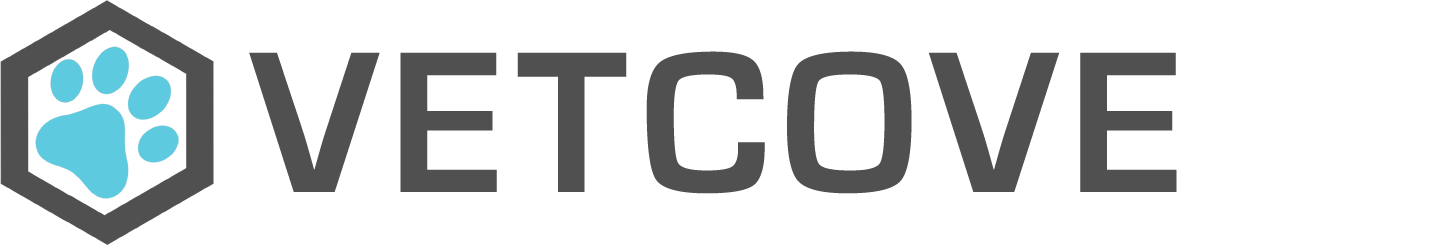
<style>
.page{position:relative;width:1440px;height:245px;background:#ffffff}
.page>*{position:absolute;margin:0}
.t1{font:208.6px "EurostileBold";letter-spacing:0.06em;color:#505050}
</style>
<div class="page">
<p class="t1" style="left:249px;top:51px;width:928px;height:143px;text-align:center">VETCOVE<br>V</p>
</div>
